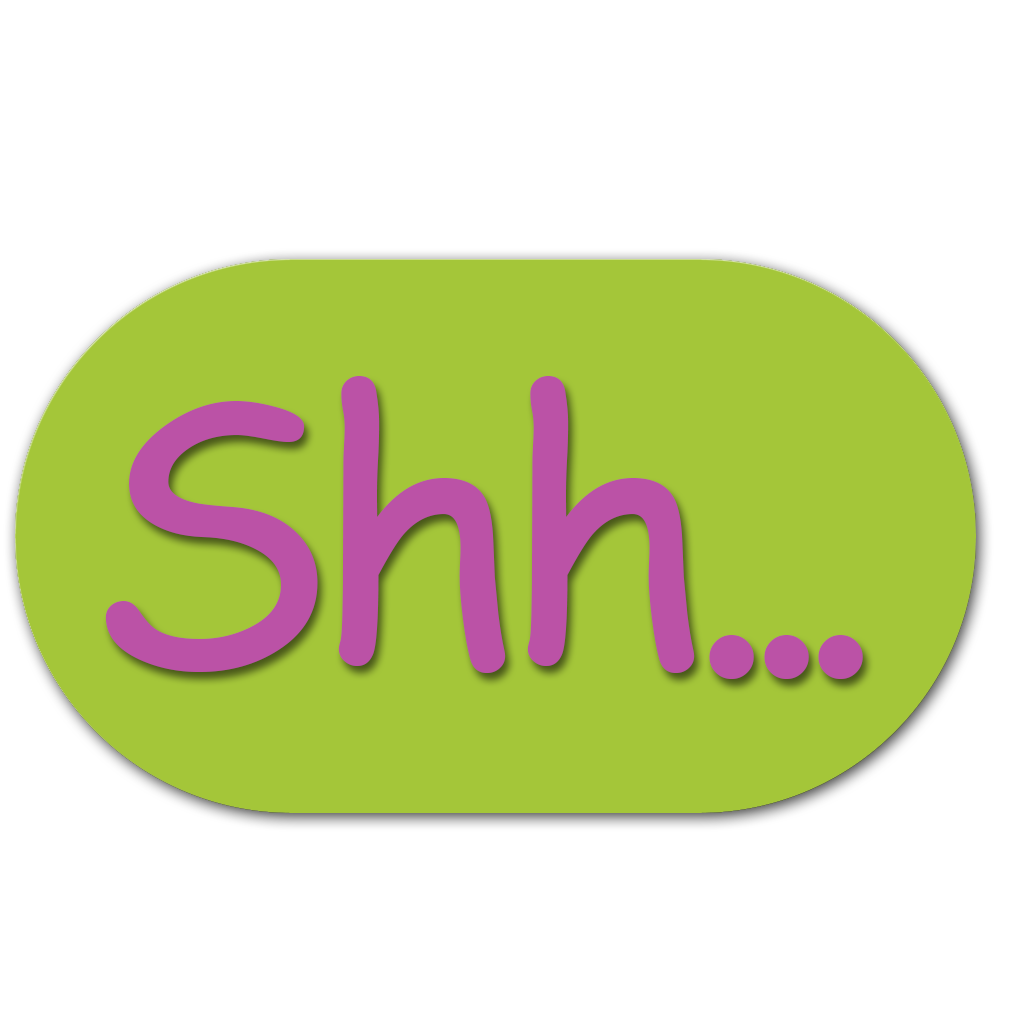
<style>
.page{position:relative;width:1024px;height:1024px;background:#ffffff}
.page>*{position:absolute;margin:0}
.t1{font:364.6px "ComicSansMS";color:#bb52a6}
</style>
<div class="page">
<p class="t1" style="left:105px;top:376px;width:758px;height:303px">Shh...</p>
</div>
